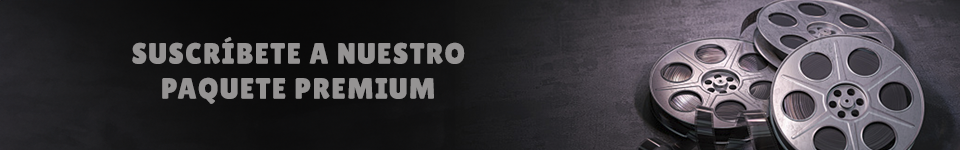
<style>
.page{position:relative;width:960px;height:150px}
.page>*{position:absolute;margin:0}
.t1{font:29.2px "LilitaOne";letter-spacing:0.05em;color:#959393}
</style>
<div class="page">
<p class="t1" style="left:132px;top:37px;width:333px;height:67px;text-align:center">SUSCRÍBETE A NUESTRO<br>PAQUETE PREMIUM</p>
</div>
